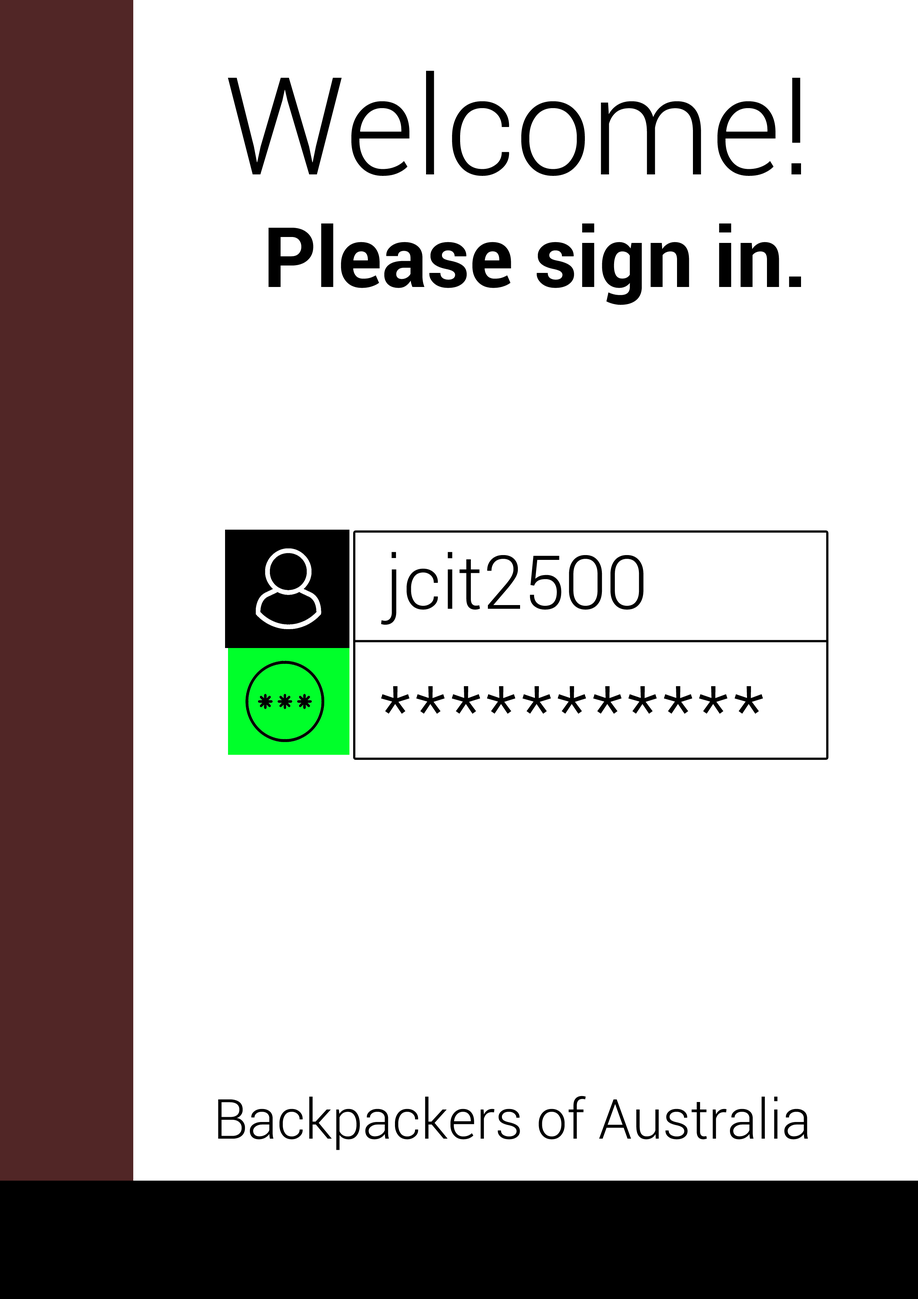
<style>
.page{position:relative;width:918px;height:1299px;background:#ffffff}
.page>*{position:absolute;margin:0}
.t1{font:135.7px "Roboto-Light";color:#000000}
.t2{font:83.3px "Roboto-Bold";color:#000000}
.t3{font:74.6px "Roboto-Light";color:#000000}
.t4{font:83.3px "Roboto-Light";color:#000000}
.t5{font:55.1px "Roboto-Light";color:#000000}
</style>
<div class="page">
<p class="t1" style="left:228px;top:71px;width:573px;height:105px">Welcome!</p>
<p class="t2" style="left:268px;top:223px;width:533px;height:82px">Please sign in.</p>
<p class="t3" style="left:381px;top:552px;width:263px;height:73px">jcit2500</p>
<p class="t4" style="left:381px;top:686px;width:382px;height:28px">***********</p>
<p class="t5" style="left:218px;top:1095px;width:590px;height:55px">Backpackers of Australia</p>
</div>
